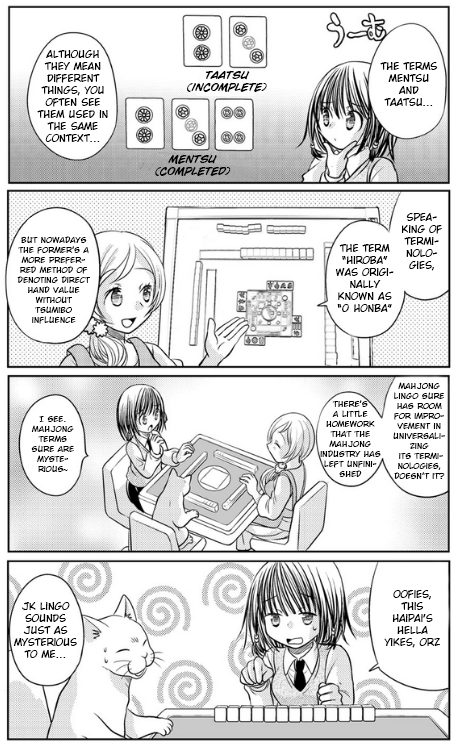
<style>
.page{position:relative;width:458px;height:748px;background:#ffffff}
.page>*{position:absolute;margin:0}
.t1{font:10px "CCWildWordsRoman";color:#000000}
.t2{font:10px "WildWordsBoldItalic";color:#000000}
.t3{font:8.3px "CCWildWordsRoman";color:#000000}
.t4{font:8.3px "TimesNewRomanPSMT";color:#000000}
</style>
<div class="page">
<p class="t1" style="left:37px;top:50px;width:71px;height:92px;text-align:center">although they mean different things, you often see them used in the same context...</p>
<p class="t1" style="left:380px;top:62px;width:58px;height:44px;text-align:center">the terms<br>mentsu and<br>taatsu...</p>
<p class="t2" style="left:187px;top:71px;width:80px;height:21px;text-align:center">taatsu<br>(incomplete)</p>
<p class="t2" style="left:155px;top:155px;width:76px;height:21px;text-align:center">mentsu<br>(completed)</p>
<p class="t1" style="left:401px;top:213px;width:41px;height:58px;text-align:center">speaking of terminologies,</p>
<p class="t3" style="left:17px;top:236px;width:73px;height:88px;text-align:center">but nowadays the former’s a more preferred method of denoting direct hand value without <br>tsumibo influence</p>
<p class="t1" style="left:335px;top:244px;width:59px;height:68px;text-align:center">the term “hiroba” was originally known as “0 honba”</p>
<p class="t3" style="left:393px;top:382px;width:52px;height:97px;text-align:center">mahjong lingo sure has room for improvement in universalizing<br> its terminologies, doesn’t it?</p>
<p class="t3" style="left:320px;top:400px;width:61px;height:77px;text-align:center">there’s <br>a little homework that the mahjong industry has left unfinished</p>
<p class="t3" style="left:31px;top:416px;width:43px;height:56px;text-align:center">I see. mahjong terms sure are mysterious<span class="t4">~</span></p>
<p class="t1" style="left:384px;top:590px;width:56px;height:58px;text-align:center">Oofies, this haipai's hella yikes, orz</p>
<p class="t1" style="left:13px;top:602px;width:64px;height:56px;text-align:center">JK lingo sounds just as mysterious to me...</p>
</div>
